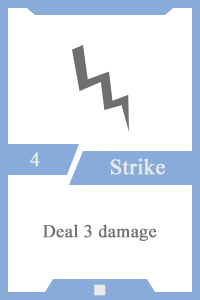
<style>
.page{position:relative;width:200px;height:300px;background:#ffffff}
.page>*{position:absolute;margin:0}
.t1{font:20px "TimesNewRomanPSMT";color:#e9e9e9;font-weight:bold}
.t2{font:22px "TimesNewRomanPSMT";color:#e9e9e9;font-weight:bold}
.t3{font:18px "TimesNewRomanPSMT";color:#6f6f6f;font-weight:bold}
.t4{font:14px "AdobeHeitiStd-Regular";color:#e9e9e9;font-weight:bold}
</style>
<div class="page">
<p class="t1" style="left:30px;top:152px;width:10px;height:15px">4</p>
<p class="t2" style="left:110px;top:158px;width:55px;height:17px">Strike</p>
<p class="t3" style="left:42px;top:224px;width:115px;height:17px">Deal 3 damage</p>
<p class="t4" style="left:94px;top:284px;width:12px;height:12px">■</p>
</div>
